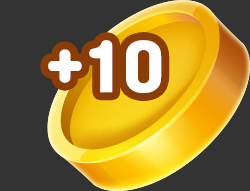
<style>
.page{position:relative;width:250px;height:191px;background:#333333}
.page>*{position:absolute;margin:0}
.t1{font:58.3px "Jalnan2TTF";letter-spacing:0.1em;color:#ffffff}
</style>
<div class="page">
<p class="t1" style="left:48px;top:40px;width:114px;height:53px">+10</p>
</div>
